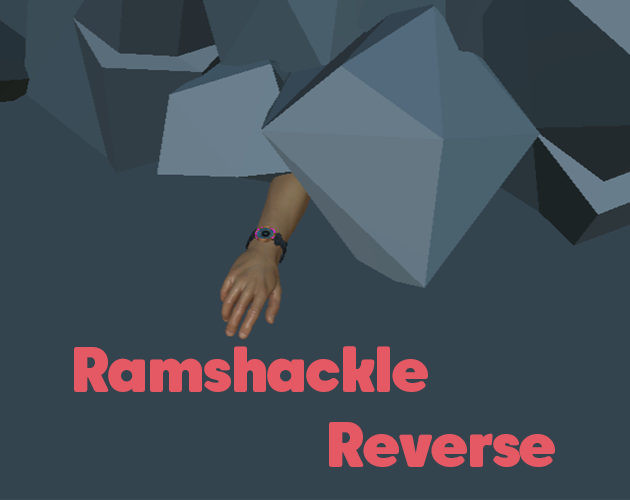
<style>
.page{position:relative;width:630px;height:500px;background:#34444f}
.page>*{position:absolute;margin:0}
.t1{font:62.5px "CarosSoftBlack";letter-spacing:-0.04em;color:#e45963}
</style>
<div class="page">
<p class="t1" style="left:74px;top:346px;width:481px;height:121px;text-align:center">Ramshackle<br>                       Reverse</p>
</div>
